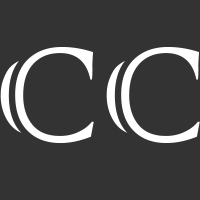
<style>
.page{position:relative;width:200px;height:200px;background:#333333}
.page>*{position:absolute;margin:0}
.t1{font:179.7px "ColonnaMT";color:#ffffff}
</style>
<div class="page">
<p class="t1" style="left:0px;top:47px;width:200px;height:96px">CC</p>
</div>
